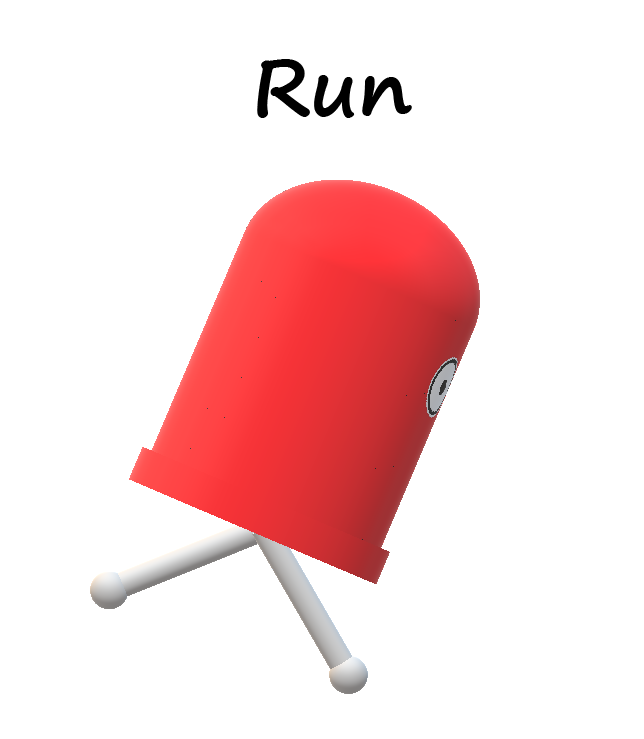
<style>
.page{position:relative;width:644px;height:739px;background:#ffffff}
.page>*{position:absolute;margin:0}
.t1{font:80px "SegoePrint-Bold";color:#000000}
</style>
<div class="page">
<p class="t1" style="left:257px;top:59px;width:155px;height:59px">Run</p>
</div>
